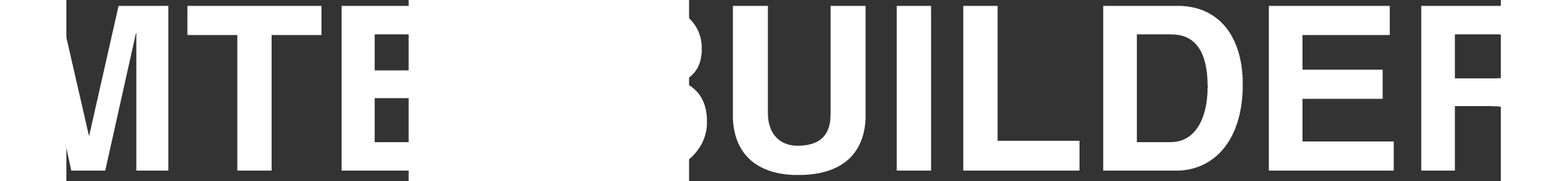
<style>
.page{position:relative;width:1568px;height:181px;background:#ffffff}
.page>*{position:absolute;margin:0}
.t1{font:229.2px "HelveticaLTPro-Bold";color:#ffffff}
</style>
<div class="page">
<p class="t1" style="left:8px;top:6px;width:1551px;height:169px">MTB BUILDER</p>
</div>
